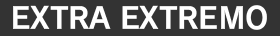
<style>
.page{position:relative;width:280px;height:36px;background:#333333}
.page>*{position:absolute;margin:0}
.t1{font:29.3px "RodinPro-B";letter-spacing:-0.007em;color:#ffffff}
</style>
<div class="page">
<p class="t1" style="left:13px;top:5px;width:254px;height:25px">EXTRA EXTREMO</p>
</div>
